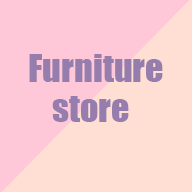
<style>
.page{position:relative;width:192px;height:192px;background:#ffdfd3}
.page>*{position:absolute;margin:0}
.t1{font:36px "Impact";color:#957dad}
</style>
<div class="page">
<p class="t1" style="left:29px;top:54px;width:134px;height:28px">Furniture</p>
<p class="t1" style="left:52px;top:96px;width:77px;height:26px">store</p>
</div>
